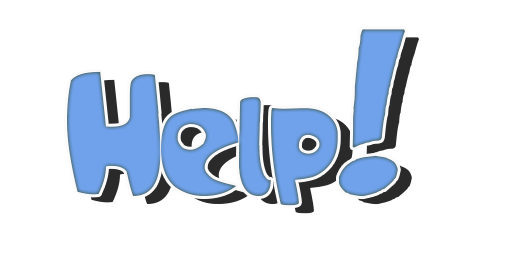
<style>
.page{position:relative;width:512px;height:256px;background:#ffffff}
.page>*{position:absolute;margin:0}
.t1{font:177.2px "Samba";color:#70a2ec}
.t2{font:177.2px "Samba"}
</style>
<div class="page">
<p class="t1" style="left:67px;top:29px;width:338px;height:177px">Help!</p>
<p class="t2" style="left:81px;top:37px;width:338px;height:177px">Help!</p>
</div>
